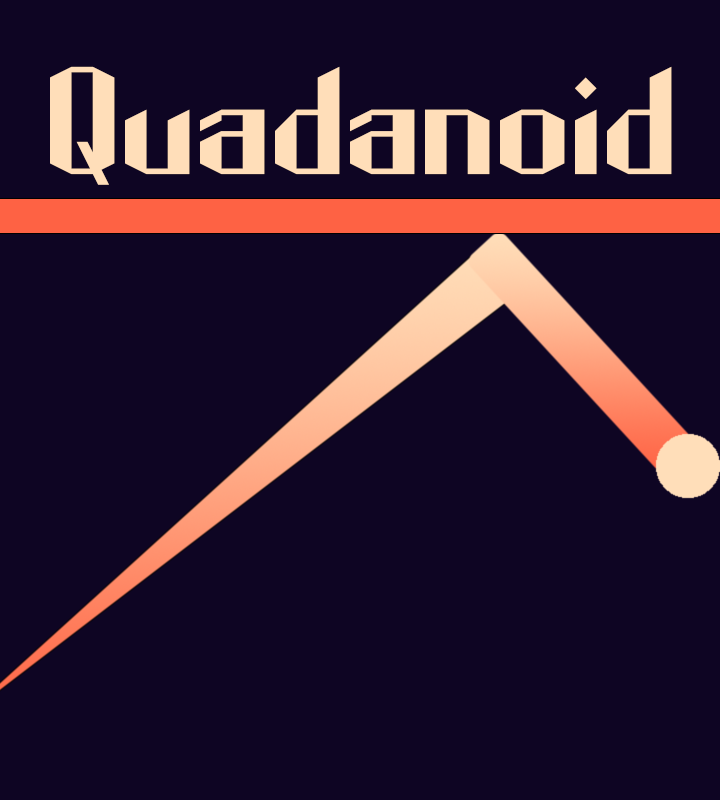
<style>
.page{position:relative;width:720px;height:800px;background:#0e0523}
.page>*{position:absolute;margin:0}
.t1{font:150px "Basalt";color:#ffdeb9}
</style>
<div class="page">
<p class="t1" style="left:50px;top:66px;width:622px;height:119px">Quadanoid</p>
</div>
